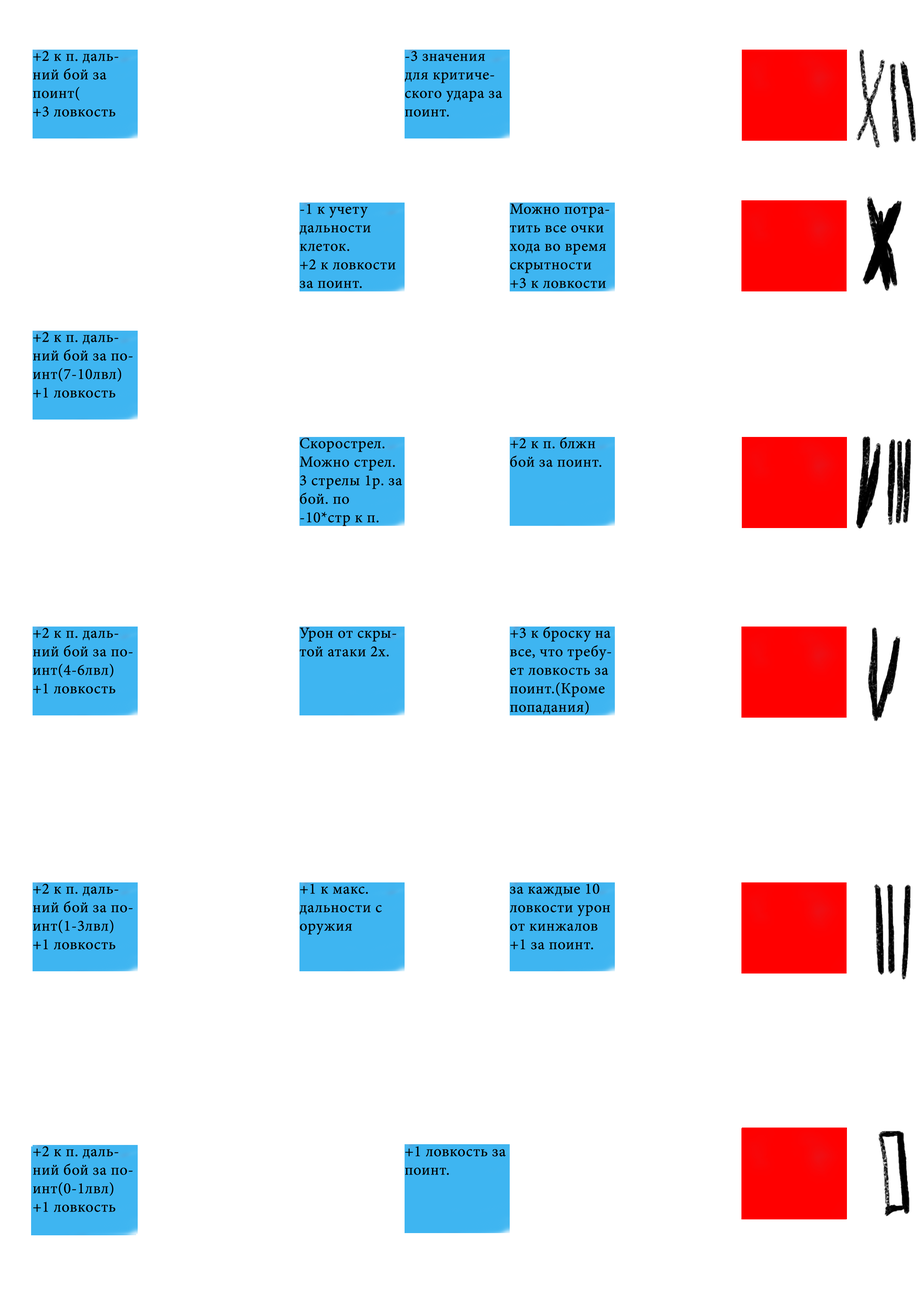
<style>
.page{position:relative;width:918px;height:1299px;background:#ffffff}
.page>*{position:absolute;margin:0}
.t1{font:15.4px "MinionPro-Regular";color:#000000;font-weight:bold}
</style>
<div class="page">
<p class="t1" style="left:33px;top:51px;width:85px;height:66px">+2 к п. дальний бой за поинт(<br>+3 ловкость</p>
<p class="t1" style="left:405px;top:51px;width:97px;height:66px">-3 значения для критического удара за поинт.</p>
<p class="t1" style="left:300px;top:204px;width:96px;height:84px">-1 к учету дальности клеток.<br>+2 к ловкости за поинт.</p>
<p class="t1" style="left:509px;top:204px;width:100px;height:84px">Можно потратить все очки хода во время скрытности<br>+3 к ловкости</p>
<p class="t1" style="left:33px;top:332px;width:100px;height:66px">+2 к п. дальний бой за поинт(7-10лвл)<br>+1 ловкость</p>
<p class="t1" style="left:300px;top:438px;width:102px;height:88px">Скорострел. <br>Можно стрел. 3 стрелы 1р. за бой. по -10*стр к п.</p>
<p class="t1" style="left:510px;top:437px;width:92px;height:30px">+2 к п. блжн бой за поинт.</p>
<p class="t1" style="left:33px;top:628px;width:100px;height:65px">+2 к п. дальний бой за поинт(4-6лвл)<br>+1 ловкость</p>
<p class="t1" style="left:300px;top:628px;width:97px;height:28px">Урон от скрытой атаки 2х.</p>
<p class="t1" style="left:510px;top:626px;width:101px;height:89px">+3 к броску на все, что требует ловкость за поинт.(Кроме попадания)</p>
<p class="t1" style="left:33px;top:883px;width:100px;height:66px">+2 к п. дальний бой за поинт(1-3лвл)<br>+1 ловкость</p>
<p class="t1" style="left:300px;top:883px;width:82px;height:52px">+1 к макс. дальности с оружия</p>
<p class="t1" style="left:510px;top:883px;width:100px;height:66px">за каждые 10 ловкости урон от кинжалов +1 за поинт.</p>
<p class="t1" style="left:33px;top:1146px;width:100px;height:66px">+2 к п. дальний бой за поинт(0-1лвл)<br>+1 ловкость</p>
<p class="t1" style="left:405px;top:1146px;width:101px;height:29px">+1 ловкость за поинт.</p>
</div>
